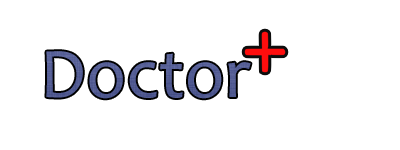
<style>
.page{position:relative;width:400px;height:150px;background:#ffffff}
.page>*{position:absolute;margin:0}
.t1{font:72px "Candara";color:#545d94}
</style>
<div class="page">
<p class="t1" style="left:46px;top:51px;width:205px;height:48px">Doctor</p>
</div>
